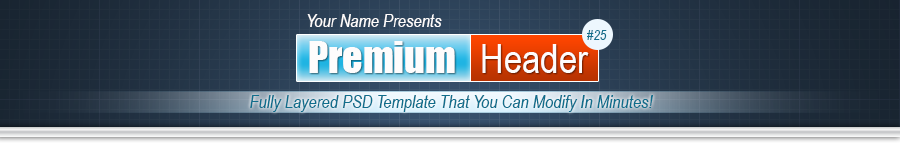
<style>
.page{position:relative;width:900px;height:143px}
.page>*{position:absolute;margin:0}
.t1{font:18px "ArialNarrow-Italic";color:#fefcfc}
.t2{font:14px "ArialNarrow-Italic";color:#106e8c}
.t3{font:40px "Impact";color:#fefcfc}
.t4{font:40px "ArialNarrow";color:#fefcfc}
.t5{font:18px "ArialNarrow-Italic";color:#106e8c}
</style>
<div class="page">
<p class="t1" style="left:307px;top:14px;width:135px;height:13px">Your Name Presents</p>
<p class="t2" style="left:587px;top:30px;width:20px;height:10px">#25</p>
<p class="t3" style="left:309px;top:41px;width:146px;height:32px">Premium</p>
<p class="t4" style="left:482px;top:44px;width:107px;height:29px">Header</p>
<p class="t5" style="left:250px;top:95px;width:403px;height:17px">Fully Layered PSD Template That You Can Modify In Minutes!</p>
</div>
